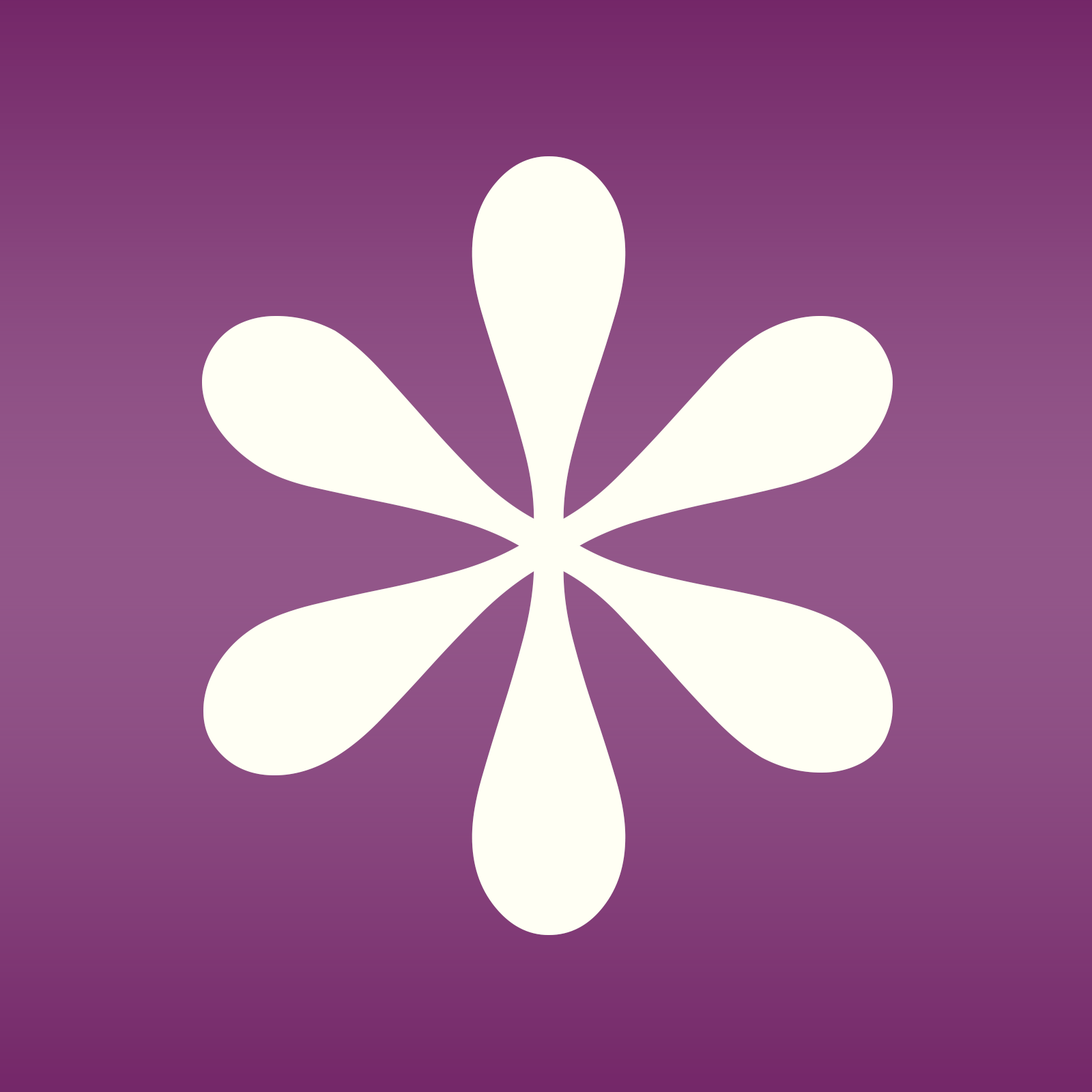
<style>
.page{position:relative;width:1092px;height:1092px}
.page>*{position:absolute;margin:0}
.t1{font:2749.2px "SinhalaMN";color:#fffff4}
</style>
<div class="page">
<p class="t1" style="left:202px;top:156px;width:691px;height:779px">*</p>
</div>
